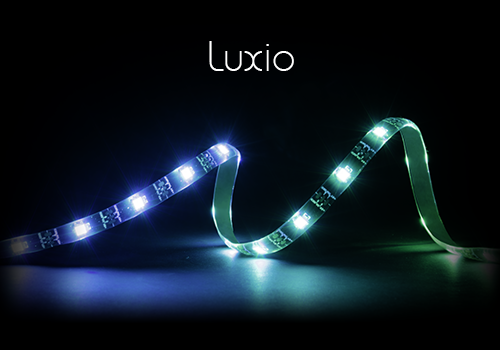
<style>
.page{position:relative;width:500px;height:350px;background:#000000}
.page>*{position:absolute;margin:0}
.t1{font:42px "Brie-Light";color:#ffffff}
</style>
<div class="page">
<p class="t1" style="left:209px;top:41px;width:85px;height:30px">Luxio</p>
</div>
